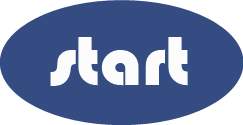
<style>
.page{position:relative;width:243px;height:125px;background:#344c81}
.page>*{position:absolute;margin:0}
.t1{font:72px "Bauhaus93";color:#fcfcfd}
</style>
<div class="page">
<p class="t1" style="left:50px;top:37px;width:138px;height:49px">start</p>
</div>
